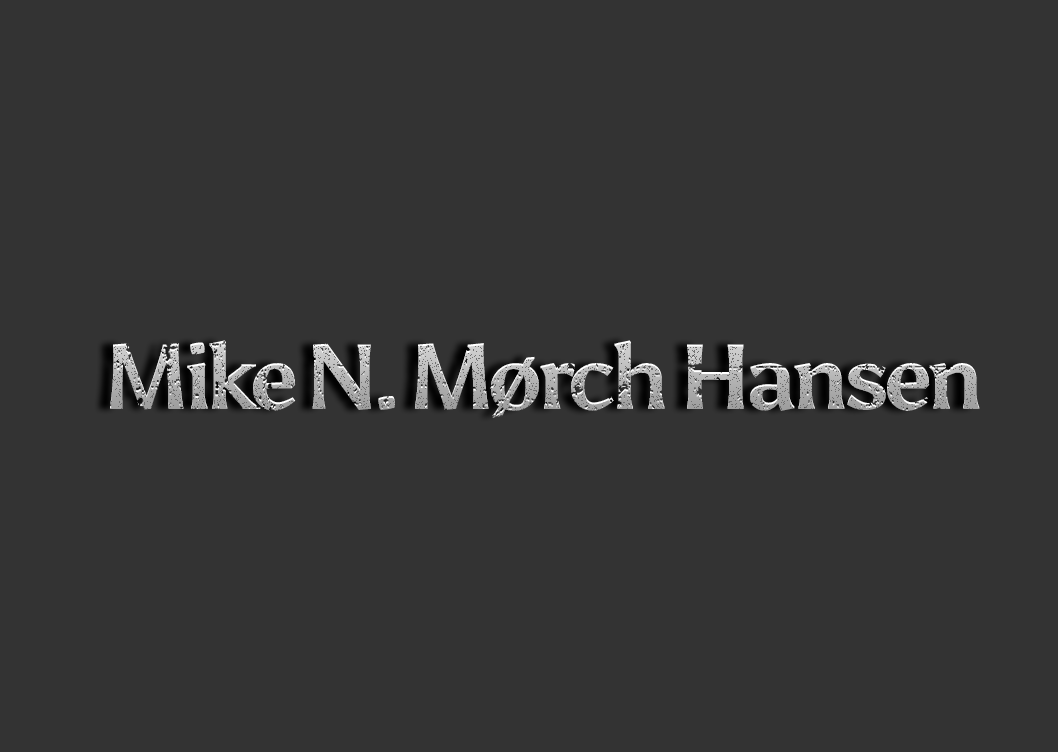
<style>
.page{position:relative;width:1058px;height:752px;background:#333333}
.page>*{position:absolute;margin:0}
.t1{font:92px "Asul-Bold";letter-spacing:-0.075em}
</style>
<div class="page">
<p class="t1" style="left:110px;top:340px;width:870px;height:78px">Mike N. Mørch Hansen</p>
</div>
